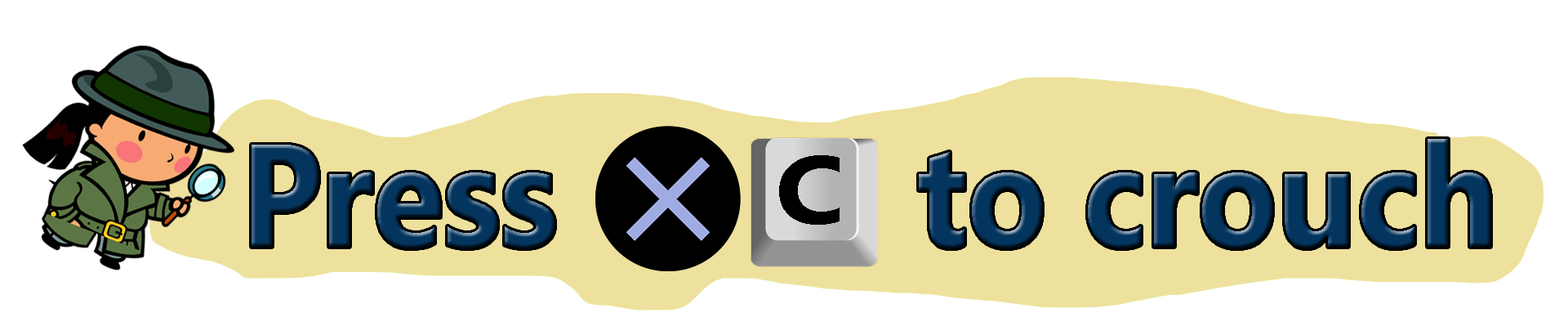
<style>
.page{position:relative;width:1568px;height:326px;background:#ffffff}
.page>*{position:absolute;margin:0}
.t1{font:145.2px "LeelawadeeUI-Bold";color:#04355e;scale:0.9 1}
.t2{font:96.2px "LeelawadeeUI-Bold";color:#000000;scale:1.16 1}
</style>
<div class="page">
<p class="t1" style="left:252px;top:139px;width:1238px;height:109px">Press          to crouch</p>
<p class="t2" style="left:779px;top:155px;width:61px;height:70px">C</p>
</div>
